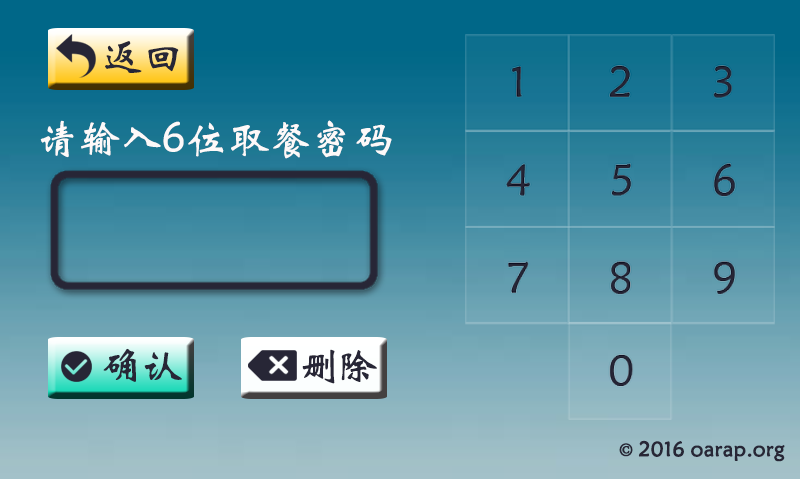
<style>
.page{position:relative;width:800px;height:480px}
.page>*{position:absolute;margin:0}
.t1{font:41.7px "STXinwei";color:#272636}
.t2{font:41.7px "STXinwei";color:#fdf9f9}
.t3{font:41.7px "STXinwei";letter-spacing:-0.14em;color:#272636}
.t4{font:20.8px "STXinwei";color:#272636;font-weight:bold}
.t5{font:20.8px "AdobeSongStd-Light";color:#272636;font-weight:bold}
</style>
<div class="page">
<p class="t1" style="left:105px;top:41px;width:74px;height:32px">返回</p>
<p class="t2" style="left:40px;top:120px;width:352px;height:39px">请输入6位取餐密码</p>
<p class="t1" style="left:103px;top:348px;width:79px;height:34px">确认</p>
<p class="t3" style="left:302px;top:349px;width:75px;height:35px">删除</p>
<p class="t4" style="left:619px;top:440px;width:166px;height:22px"><span class="t5">© </span>2016 oarap.org</p>
</div>
